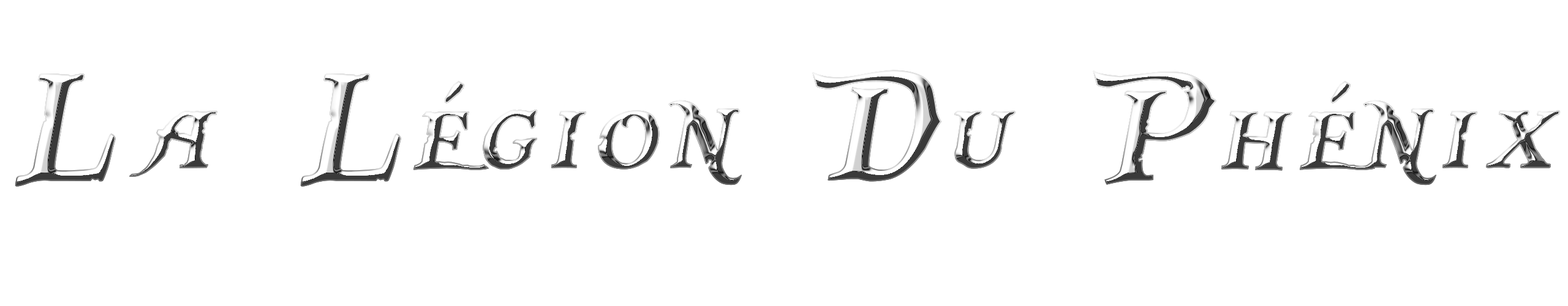
<style>
.page{position:relative;width:1568px;height:306px;background:#ffffff}
.page>*{position:absolute;margin:0}
.t1{font:161.5px "PiecesofEight";letter-spacing:0.05em;font-weight:bold;font-style:italic;scale:1.05 1}
</style>
<div class="page">
<p class="t1" style="left:15px;top:70px;width:1545px;height:117px">La Légion Du Phénix</p>
<p class="t1" style="left:15px;top:70px;width:1545px;height:117px">La Légion Du Phénix</p>
</div>
